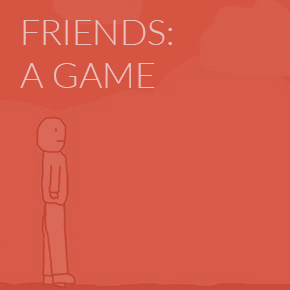
<style>
.page{position:relative;width:290px;height:290px;background:#d85a48}
.page>*{position:absolute;margin:0}
.t1{font:36px "Lato-Light";color:#eac0bc}
</style>
<div class="page">
<p class="t1" style="left:20px;top:20px;width:152px;height:68px">FRIENDS:<br>A GAME</p>
</div>
